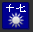
<style>
.page{position:relative;width:33px;height:32px;background:#000090}
.page>*{position:absolute;margin:0}
.t1{font:10.4px "SimSun";color:#ffffff}
</style>
<div class="page">
<p class="t1" style="left:6px;top:4px;width:20px;height:8px">十七</p>
</div>
